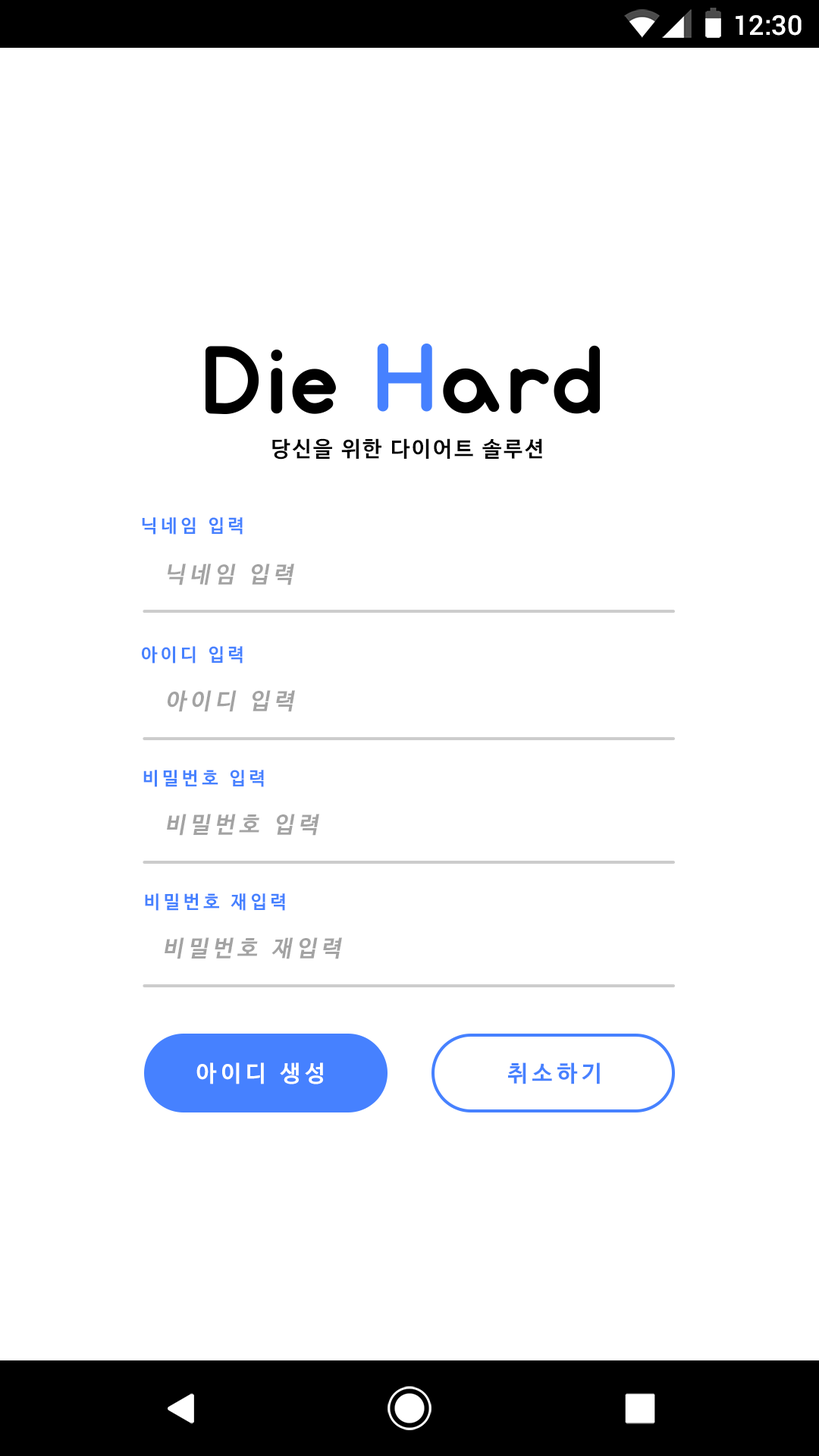
<style>
.page{position:relative;width:819px;height:1456px;background:#ffffff}
.page>*{position:absolute;margin:0}
.t1{font:27.3px "Roboto-Medium";color:#ffffff}
.t2{font:21.4px "NanumBarunGothicBold";letter-spacing:0.1em;color:#000000}
.t3{font:18.2px "NanumBarunGothicBold";letter-spacing:0.2em;color:#4681ff}
.t4{font:22.7px "NanumBarunGothicBold";letter-spacing:0.2em;color:#a3a3a3;font-style:italic}
.t5{font:22.7px "NanumBarunGothicBold";letter-spacing:0.2em;color:#ffffff}
.t6{font:22.7px "NanumBarunGothicBold";letter-spacing:0.2em;color:#4681ff}
</style>
<div class="page">
<p class="t1" style="left:736px;top:15px;width:66px;height:21px">12:30</p>
<p class="t2" style="left:272px;top:438px;width:270px;height:22px">당신을 위한 다이어트 솔루션</p>
<p class="t3" style="left:142px;top:517px;width:101px;height:18px">닉네임 입력</p>
<p class="t4" style="left:168px;top:563px;width:126px;height:22px">닉네임 입력</p>
<p class="t3" style="left:142px;top:646px;width:101px;height:18px">아이디 입력</p>
<p class="t4" style="left:168px;top:690px;width:127px;height:22px">아이디 입력</p>
<p class="t3" style="left:143px;top:770px;width:121px;height:17px">비밀번호 입력</p>
<p class="t4" style="left:167px;top:814px;width:152px;height:22px">비밀번호 입력</p>
<p class="t3" style="left:145px;top:893px;width:140px;height:18px">비밀번호 재입력</p>
<p class="t4" style="left:165px;top:937px;width:177px;height:22px">비밀번호 재입력</p>
<p class="t5" style="left:196px;top:1062px;width:127px;height:22px">아이디 생성</p>
<p class="t6" style="left:508px;top:1062px;width:92px;height:22px">취소하기</p>
</div>
